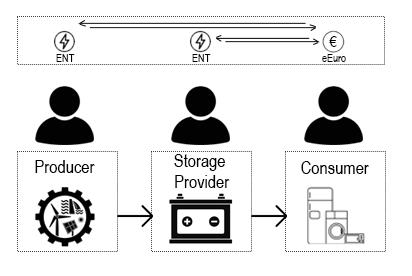
<style>
.page{position:relative;width:412px;height:276px;background:#ffffff}
.page>*{position:absolute;margin:0}
.t1{font:16px "ArialNarrow";color:#000000}
.t2{font:11px "ArialNarrow";color:#000000}
.t3{font:18px "ArialNarrow";color:#000000}
</style>
<div class="page">
<p class="t1" style="left:329px;top:36px;width:8px;height:11px">€</p>
<p class="t2" style="left:56px;top:54px;width:19px;height:8px">ENT</p>
<p class="t2" style="left:192px;top:54px;width:19px;height:8px">ENT</p>
<p class="t2" style="left:322px;top:54px;width:24px;height:8px">eEuro</p>
<p class="t3" style="left:35px;top:160px;width:60px;height:13px">Producer</p>
<p class="t3" style="left:174px;top:154px;width:56px;height:34px;text-align:center">Storage <br>Provider</p>
<p class="t3" style="left:301px;top:161px;width:68px;height:13px">Consumer</p>
</div>
